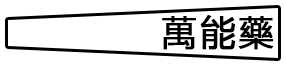
<style>
.page{position:relative;width:286px;height:66px;background:#ffffff}
.page>*{position:absolute;margin:0}
.t1{font:35px "MicrosoftYaHei";letter-spacing:0.06em;color:#000000;font-weight:bold}
</style>
<div class="page">
<p class="t1" style="left:162px;top:15px;width:112px;height:35px">萬能藥</p>
</div>
